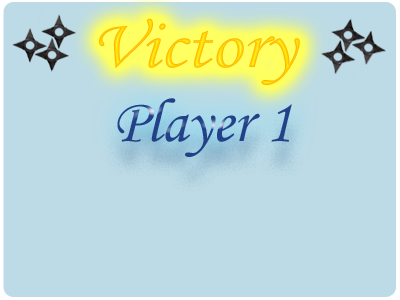
<style>
.page{position:relative;width:400px;height:300px;background:#bcdbe6}
.page>*{position:absolute;margin:0}
.t1{font:70.1px "MonotypeCorsiva";color:#fece00;scale:1.11 1}
.t2{font:62px "MonotypeCorsiva";color:#234187}
</style>
<div class="page">
<p class="t1" style="left:99px;top:18px;width:201px;height:67px">Victory</p>
<p class="t2" style="left:117px;top:98px;width:175px;height:59px">Player 1</p>
</div>
